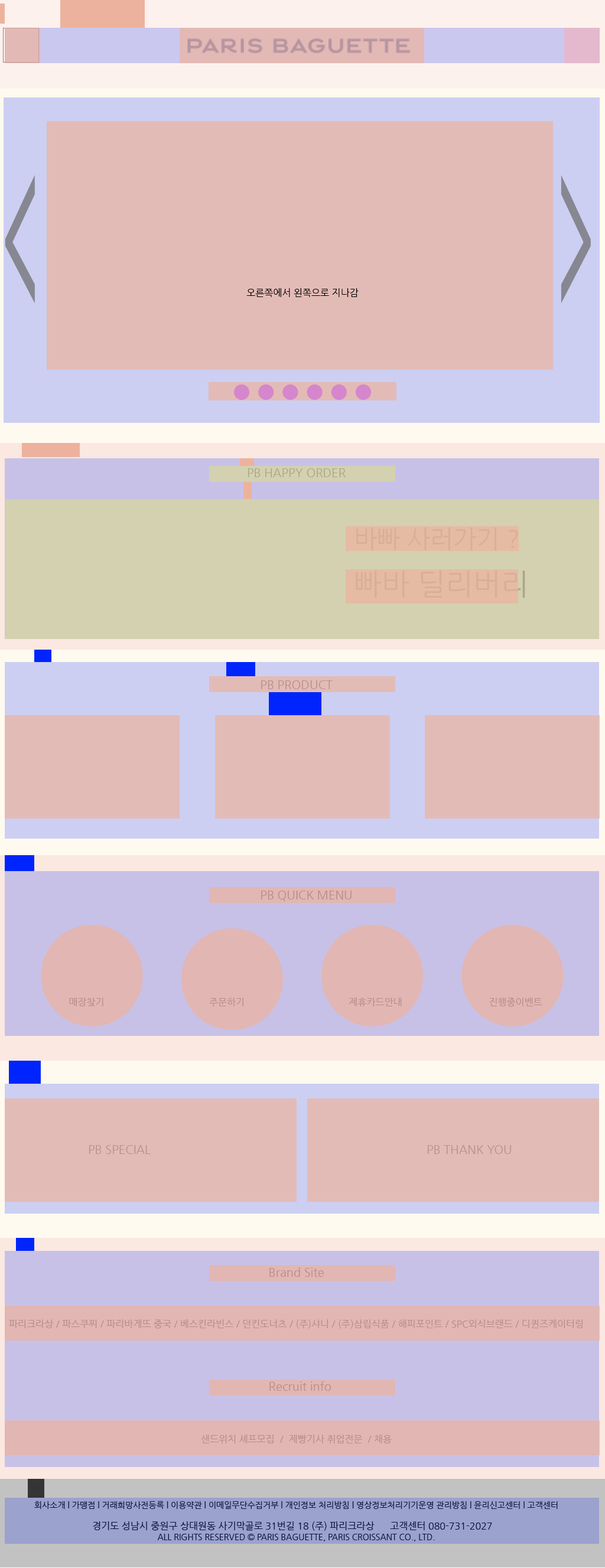
<style>
.page{position:relative;width:605px;height:1568px;background:#e3bbb6}
.page>*{position:absolute;margin:0}
.t1{font:9.4px "NanumGothic";color:#000000}
.t2{font:11.8px "NanumGothic";color:#a9a786}
.t3{font:24.6px "NanumGothic";color:#d9af96}
.t4{font:29.5px "NanumGothic";color:#d9af96}
.t5{font:11.8px "NanumGothic";color:#b9908c}
.t6{font:11.8px "NanumGothic";color:#b88c88}
.t7{font:9.4px "NanumGothic";color:#b88c88}
.t8{font:8.3px "NanumGothic";color:#0d143f}
.t9{font:9.4px "NanumGothic";color:#0d143f}
</style>
<div class="page">
<p class="t1" style="left:246px;top:288px;width:112px;height:9px">오른쪽에서 왼쪽으로 지나감</p>
<p class="t2" style="left:247px;top:468px;width:98px;height:9px">PB HAPPY ORDER</p>
<p class="t3" style="left:356px;top:527px;width:162px;height:23px">바빠 사러가기 ?</p>
<p class="t4" style="left:356px;top:571px;width:169px;height:27px">빠바 딜리버리</p>
<p class="t5" style="left:261px;top:680px;width:71px;height:9px">PB PRODUCT</p>
<p class="t6" style="left:261px;top:891px;width:90px;height:10px">PB QUICK MENU</p>
<p class="t7" style="left:69px;top:997px;width:34px;height:9px">매장찾기</p>
<p class="t7" style="left:209px;top:997px;width:34px;height:9px">주문하기</p>
<p class="t7" style="left:349px;top:997px;width:53px;height:9px">제휴카드안내</p>
<p class="t7" style="left:489px;top:997px;width:53px;height:10px">진행중이벤트</p>
<p class="t5" style="left:89px;top:1145px;width:62px;height:9px">PB SPECIAL</p>
<p class="t5" style="left:427px;top:1145px;width:84px;height:9px">PB THANK YOU</p>
<p class="t6" style="left:269px;top:1267px;width:55px;height:10px">Brand Site</p>
<p class="t7" style="left:9px;top:1319px;width:574px;height:10px">파리크라상 / 파스쿠찌 / 파리바게뜨 중국 / 베스킨라빈스 / 던킨도너츠 / (주)샤니 / (주)삼립식품 / 해피포인트 / SPC외식브랜드 / 디퀸즈케이터링</p>
<p class="t6" style="left:269px;top:1381px;width:62px;height:10px">Recruit info</p>
<p class="t7" style="left:201px;top:1435px;width:191px;height:8px">샌드위치 셰프모집  /  제빵기사 취업전문  / 채용</p>
<p class="t8" style="left:34px;top:1501px;width:524px;height:9px">회사소개 l 가맹점 l 거래희망사전등록 l 이용약관 l 이메일무단수집거부 l 개인정보 처리방침 l 영상정보처리기기운영 관리방침 l 윤리신고센터 l 고객센터</p>
<p class="t9" style="left:93px;top:1521px;width:399px;height:10px">경기도 성남시 중원구 상대원동 사기막골로 31번길 18 (주) 파리크라상      고객센터 080-731-2027</p>
<p class="t8" style="left:157px;top:1534px;width:278px;height:7px">ALL RIGHTS RESERVED © PARIS BAGUETTE, PARIS CROISSANT CO., LTD.</p>
</div>
